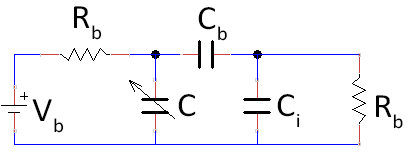
<style>
.page{position:relative;width:420px;height:155px;background:#ffffff}
.page>*{position:absolute;margin:0}
.t1{font:34.2px "Calibri";letter-spacing:0.015em;color:#000000;scale:1.05 1}
</style>
<div class="page">
<p class="t1" style="left:74px;top:6px;width:28px;height:34px">Rb</p>
<p class="t1" style="left:198px;top:7px;width:29px;height:34px">Cb</p>
<p class="t1" style="left:32px;top:99px;width:32px;height:34px">Vb</p>
<p class="t1" style="left:178px;top:94px;width:18px;height:23px">C</p>
<p class="t1" style="left:277px;top:94px;width:23px;height:34px">Ci</p>
<p class="t1" style="left:376px;top:95px;width:27px;height:34px">Rb</p>
</div>
